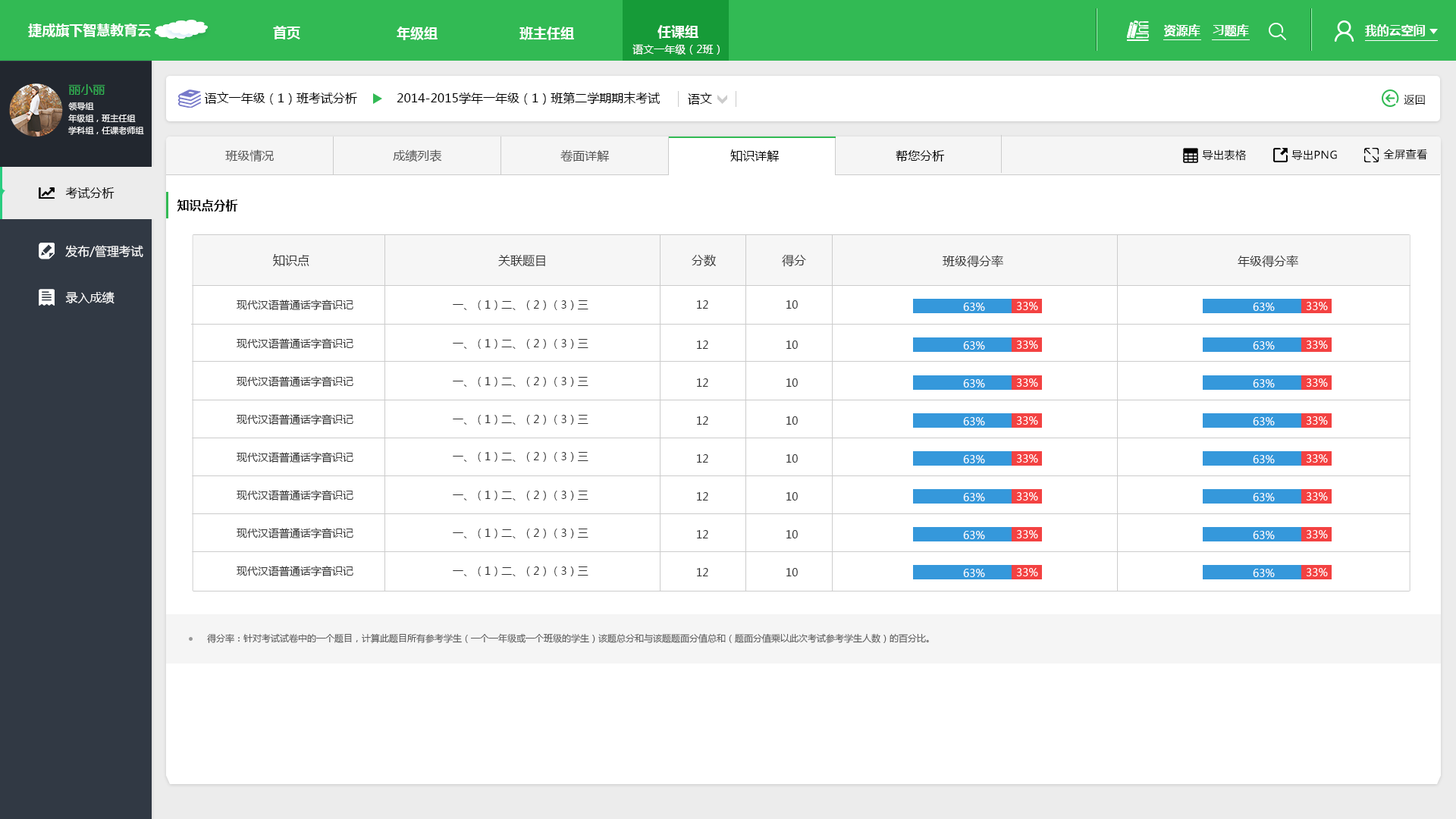
<style>
.page{position:relative;width:1456px;height:819px;background:#ffffff}
.page>*{position:absolute;margin:0}
.t1{font:13.6px "MicrosoftYaHei-Bold";color:#ffffff}
.t2{font:12.1px "MicrosoftYaHei-Bold";color:#ffffff}
.t3{font:10.6px "MicrosoftYaHei";color:#ffffff}
.t4{font:12.1px "MicrosoftYaHei";color:#32ba54}
.t5{font:12.1px "MicrosoftYaHei";color:#000000}
.t6{font:10.6px "MicrosoftYaHei";letter-spacing:0.04em;color:#000000}
.t7{font:8.3px/12.1px "MicrosoftYaHei";color:#ffffff}
.t8{font:12.1px "MicrosoftYaHei";color:#545454}
.t9{font:12.1px "MicrosoftYaHei-Bold";color:#000000}
.t10{font:12.1px "MicrosoftYaHei";color:#ffffff}
.t11{font:12.1px "MicrosoftYaHei";color:#333333}
.t12{font:10.6px "MicrosoftYaHei";color:#333333}
.t13{font:10.6px "MicrosoftYaHei"}
.t14{font:9.1px "MicrosoftYaHei";color:#606060}
</style>
<div class="page">
<p class="t1" style="left:28px;top:24px;width:123px;height:13px">捷成旗下智慧教育云</p>
<p class="t1" style="left:273px;top:26px;width:27px;height:13px">首页</p>
<p class="t1" style="left:397px;top:27px;width:41px;height:13px">年级组</p>
<p class="t1" style="left:519px;top:27px;width:55px;height:13px">班主任组</p>
<p class="t1" style="left:657px;top:25px;width:41px;height:14px">任课组</p>
<p class="t2" style="left:1164px;top:24px;width:36px;height:13px">资源库</p>
<p class="t2" style="left:1213px;top:24px;width:36px;height:13px">习题库</p>
<p class="t2" style="left:1365px;top:24px;width:60px;height:12px">我的云空间</p>
<p class="t3" style="left:632px;top:44px;width:88px;height:11px">语文一年级（2班）</p>
<p class="t4" style="left:68px;top:84px;width:37px;height:11px">丽小丽</p>
<p class="t5" style="left:205px;top:92px;width:152px;height:13px">语文一年级（1）班考试分析</p>
<p class="t5" style="left:397px;top:92px;width:263px;height:13px">2014-2015学年一年级（1）班第二学期期末考试</p>
<p class="t5" style="left:688px;top:93px;width:24px;height:12px">语文</p>
<p class="t6" style="left:1404px;top:94px;width:21px;height:11px">返回</p>
<p class="t7" style="left:68px;top:102px;width:76px;height:33px">领导组<br>年级组，班主任组<br>学科组，任课老师组</p>
<p class="t8" style="left:225px;top:149px;width:49px;height:13px">班级情况</p>
<p class="t8" style="left:393px;top:149px;width:49px;height:13px">成绩列表</p>
<p class="t8" style="left:560px;top:149px;width:50px;height:13px">卷面详解</p>
<p class="t5" style="left:730px;top:149px;width:50px;height:13px">知识详解</p>
<p class="t6" style="left:1202px;top:149px;width:44px;height:12px">导出表格</p>
<p class="t6" style="left:1291px;top:149px;width:46px;height:11px">导出PNG</p>
<p class="t6" style="left:1383px;top:149px;width:44px;height:11px">全屏查看</p>
<p class="t5" style="left:896px;top:150px;width:49px;height:12px">帮您分析</p>
<p class="t5" style="left:65px;top:187px;width:50px;height:12px">考试分析</p>
<p class="t9" style="left:177px;top:199px;width:61px;height:13px">知识点分析</p>
<p class="t10" style="left:65px;top:245px;width:78px;height:13px">发布/管理考试</p>
<p class="t11" style="left:273px;top:254px;width:36px;height:12px">知识点</p>
<p class="t11" style="left:498px;top:255px;width:47px;height:11px">关联题目</p>
<p class="t11" style="left:692px;top:254px;width:24px;height:13px">分数</p>
<p class="t11" style="left:782px;top:254px;width:24px;height:13px">得分</p>
<p class="t11" style="left:943px;top:255px;width:60px;height:13px">班级得分率</p>
<p class="t11" style="left:1238px;top:255px;width:60px;height:13px">年级得分率</p>
<p class="t10" style="left:65px;top:291px;width:50px;height:13px">录入成绩</p>
<p class="t12" style="left:237px;top:300px;width:116px;height:11px">现代汉语普通话字音识记</p>
<p class="t12" style="left:453px;top:300px;width:135px;height:10px">一、（1）二、（2）（3）三</p>
<p class="t12" style="left:697px;top:300px;width:11px;height:9px">12</p>
<p class="t12" style="left:786px;top:300px;width:12px;height:9px">10</p>
<p class="t3" style="left:963px;top:303px;width:22px;height:8px">63%</p>
<p class="t3" style="left:1016px;top:302px;width:22px;height:8px">33%</p>
<p class="t3" style="left:1253px;top:303px;width:22px;height:8px">63%</p>
<p class="t3" style="left:1306px;top:302px;width:22px;height:8px">33%</p>
<p class="t12" style="left:237px;top:338px;width:116px;height:12px">现代汉语普通话字音识记</p>
<p class="t12" style="left:453px;top:339px;width:135px;height:10px">一、（1）二、（2）（3）三</p>
<p class="t12" style="left:697px;top:340px;width:11px;height:9px">12</p>
<p class="t12" style="left:786px;top:340px;width:12px;height:9px">10</p>
<p class="t13" style="left:963px;top:340px;width:22px;height:9px">63%</p>
<p class="t3" style="left:963px;top:341px;width:22px;height:9px">63%</p>
<p class="t3" style="left:1016px;top:340px;width:22px;height:9px">33%</p>
<p class="t13" style="left:1253px;top:340px;width:22px;height:9px">63%</p>
<p class="t3" style="left:1253px;top:341px;width:22px;height:9px">63%</p>
<p class="t3" style="left:1306px;top:340px;width:22px;height:9px">33%</p>
<p class="t12" style="left:237px;top:376px;width:116px;height:12px">现代汉语普通话字音识记</p>
<p class="t12" style="left:453px;top:377px;width:135px;height:10px">一、（1）二、（2）（3）三</p>
<p class="t12" style="left:697px;top:378px;width:11px;height:9px">12</p>
<p class="t12" style="left:786px;top:378px;width:12px;height:9px">10</p>
<p class="t13" style="left:963px;top:378px;width:22px;height:9px">63%</p>
<p class="t3" style="left:963px;top:379px;width:22px;height:9px">63%</p>
<p class="t3" style="left:1016px;top:378px;width:22px;height:9px">33%</p>
<p class="t13" style="left:1253px;top:378px;width:22px;height:9px">63%</p>
<p class="t3" style="left:1253px;top:379px;width:22px;height:9px">63%</p>
<p class="t3" style="left:1306px;top:378px;width:22px;height:9px">33%</p>
<p class="t12" style="left:237px;top:414px;width:116px;height:11px">现代汉语普通话字音识记</p>
<p class="t12" style="left:453px;top:415px;width:135px;height:10px">一、（1）二、（2）（3）三</p>
<p class="t12" style="left:697px;top:416px;width:11px;height:9px">12</p>
<p class="t12" style="left:786px;top:416px;width:12px;height:9px">10</p>
<p class="t13" style="left:963px;top:416px;width:22px;height:9px">63%</p>
<p class="t3" style="left:963px;top:417px;width:22px;height:8px">63%</p>
<p class="t3" style="left:1016px;top:416px;width:22px;height:9px">33%</p>
<p class="t13" style="left:1253px;top:416px;width:22px;height:9px">63%</p>
<p class="t3" style="left:1253px;top:417px;width:22px;height:8px">63%</p>
<p class="t3" style="left:1306px;top:416px;width:22px;height:9px">33%</p>
<p class="t12" style="left:237px;top:452px;width:116px;height:11px">现代汉语普通话字音识记</p>
<p class="t12" style="left:453px;top:452px;width:135px;height:10px">一、（1）二、（2）（3）三</p>
<p class="t12" style="left:697px;top:454px;width:11px;height:9px">12</p>
<p class="t12" style="left:786px;top:454px;width:12px;height:9px">10</p>
<p class="t13" style="left:963px;top:454px;width:22px;height:9px">63%</p>
<p class="t3" style="left:963px;top:455px;width:22px;height:8px">63%</p>
<p class="t3" style="left:1016px;top:454px;width:22px;height:9px">33%</p>
<p class="t13" style="left:1253px;top:454px;width:22px;height:9px">63%</p>
<p class="t3" style="left:1253px;top:455px;width:22px;height:8px">63%</p>
<p class="t3" style="left:1306px;top:454px;width:22px;height:9px">33%</p>
<p class="t12" style="left:237px;top:490px;width:116px;height:11px">现代汉语普通话字音识记</p>
<p class="t12" style="left:453px;top:491px;width:135px;height:9px">一、（1）二、（2）（3）三</p>
<p class="t12" style="left:697px;top:492px;width:11px;height:8px">12</p>
<p class="t12" style="left:786px;top:492px;width:12px;height:8px">10</p>
<p class="t3" style="left:963px;top:493px;width:22px;height:8px">63%</p>
<p class="t3" style="left:1016px;top:492px;width:22px;height:8px">33%</p>
<p class="t3" style="left:1253px;top:493px;width:22px;height:8px">63%</p>
<p class="t3" style="left:1306px;top:492px;width:22px;height:8px">33%</p>
<p class="t12" style="left:237px;top:528px;width:116px;height:11px">现代汉语普通话字音识记</p>
<p class="t12" style="left:453px;top:529px;width:135px;height:9px">一、（1）二、（2）（3）三</p>
<p class="t12" style="left:697px;top:530px;width:11px;height:8px">12</p>
<p class="t12" style="left:786px;top:530px;width:12px;height:8px">10</p>
<p class="t3" style="left:963px;top:531px;width:22px;height:8px">63%</p>
<p class="t3" style="left:1016px;top:530px;width:22px;height:8px">33%</p>
<p class="t3" style="left:1253px;top:531px;width:22px;height:8px">63%</p>
<p class="t3" style="left:1306px;top:530px;width:22px;height:8px">33%</p>
<p class="t12" style="left:237px;top:566px;width:116px;height:11px">现代汉语普通话字音识记</p>
<p class="t12" style="left:453px;top:566px;width:135px;height:10px">一、（1）二、（2）（3）三</p>
<p class="t12" style="left:697px;top:568px;width:11px;height:8px">12</p>
<p class="t12" style="left:786px;top:568px;width:12px;height:8px">10</p>
<p class="t3" style="left:963px;top:569px;width:22px;height:8px">63%</p>
<p class="t3" style="left:1016px;top:568px;width:22px;height:8px">33%</p>
<p class="t3" style="left:1253px;top:569px;width:22px;height:8px">63%</p>
<p class="t3" style="left:1306px;top:568px;width:22px;height:8px">33%</p>
<p class="t14" style="left:207px;top:633px;width:722px;height:10px">得分率：针对考试试卷中的一个题目，计算此题目所有参考学生（一个一年级或一个班级的学生）该题总分和与该题题面分值总和（题面分值乘以此次考试参考学生人数）的百分比。</p>
</div>
